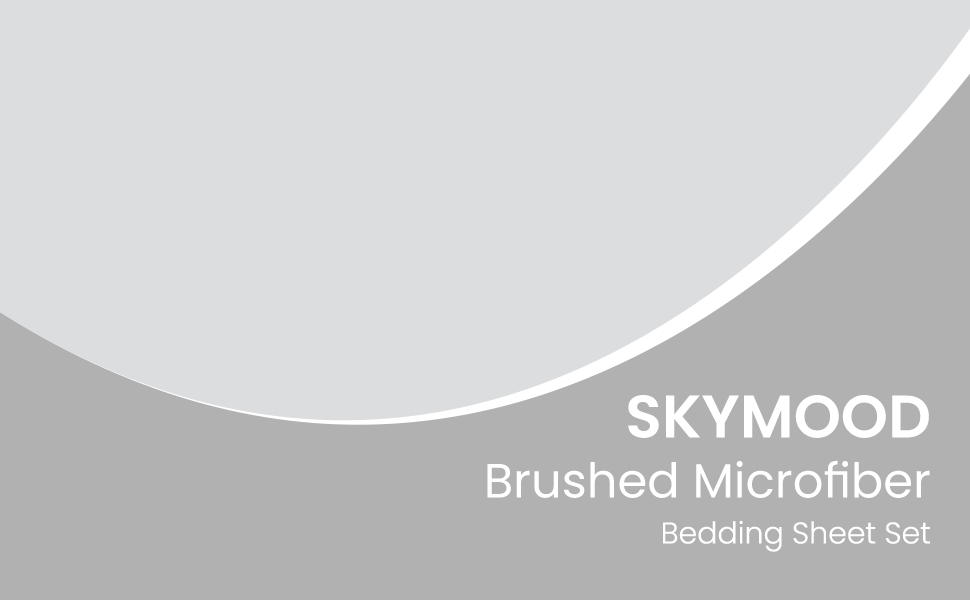
<style>
.page{position:relative;width:970px;height:600px;background:#dcdddf}
.page>*{position:absolute;margin:0}
.t1{font:60px "Poppins-SemiBold";color:#ffffff;text-transform:uppercase}
.t2{font:48px "Poppins-Regular";color:#ffffff}
.t3{font:30px "Poppins-Light";color:#ffffff}
</style>
<div class="page">
<p class="t1" style="left:628px;top:395px;width:301px;height:43px">SKYMOOD</p>
<p class="t2" style="left:487px;top:460px;width:443px;height:38px">Brushed Microfiber</p>
<p class="t3" style="left:663px;top:520px;width:267px;height:32px">Bedding Sheet Set</p>
</div>
